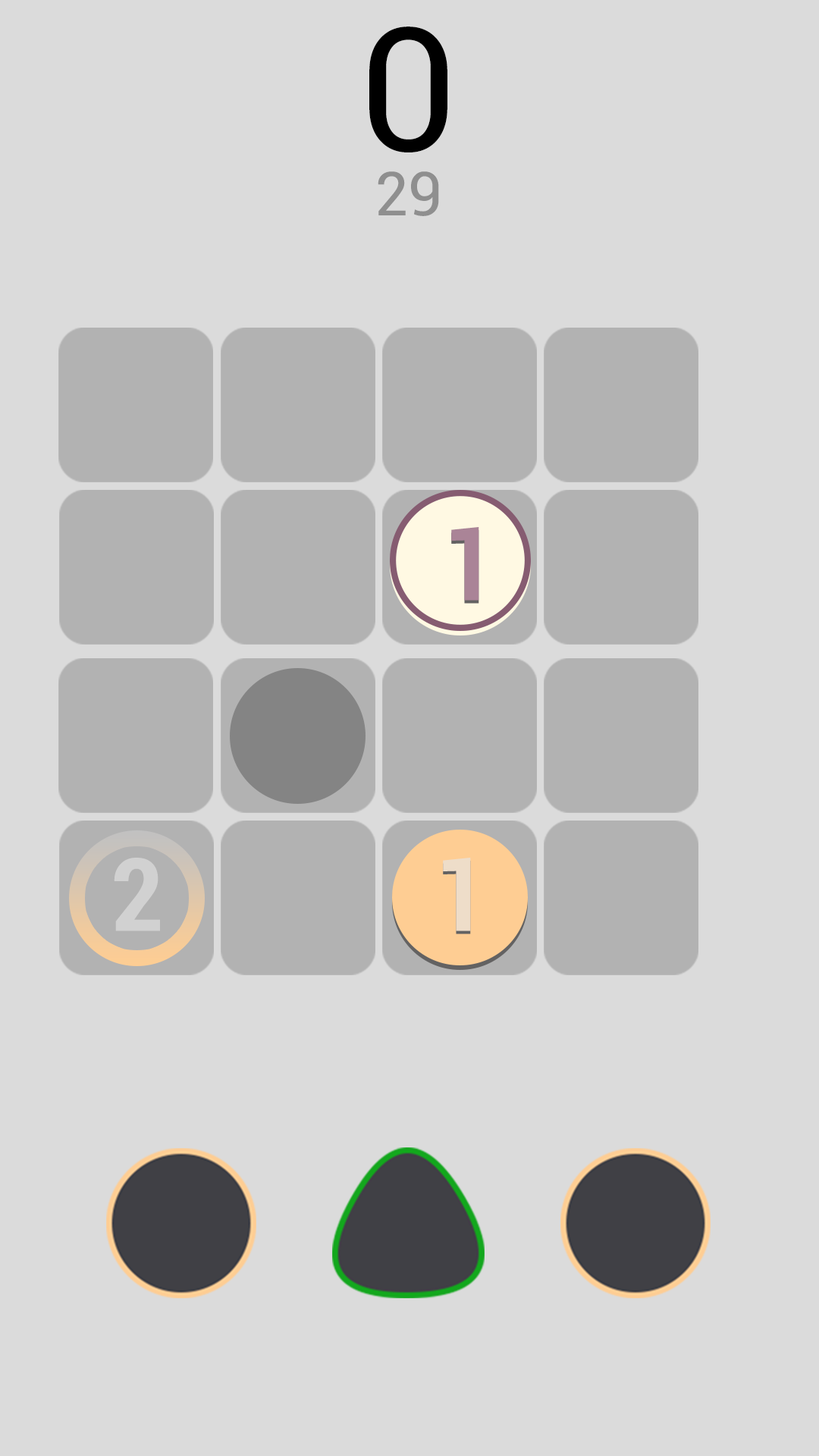
<style>
.page{position:relative;width:819px;height:1456px;background:#dbdbdb}
.page>*{position:absolute;margin:0}
.t1{font:171.9px "Roboto-Regular";color:#000000}
.t2{font:60.7px "Roboto-Regular";color:#8f8f8f}
.t3{font:101.1px "Roboto-BoldCondensed";color:#aa8497}
.t4{font:101.1px "Roboto-BoldCondensed";color:#d1d1d1}
.t5{font:101.1px "Roboto-BoldCondensed";color:#eeddc9}
</style>
<div class="page">
<p class="t1" style="left:369px;top:27px;width:78px;height:125px">0</p>
<p class="t2" style="left:378px;top:171px;width:61px;height:45px">29</p>
<p class="t3" style="left:451px;top:527px;width:28px;height:74px">1</p>
<p class="t4" style="left:114px;top:858px;width:46px;height:73px">2</p>
<p class="t5" style="left:443px;top:858px;width:28px;height:73px">1</p>
</div>
